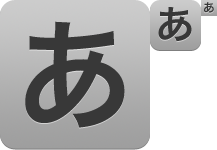
<style>
.page{position:relative;width:217px;height:150px;background:#ffffff}
.page>*{position:absolute;margin:0}
.t1{font:39.2px "HiraKakuProN-W6";color:#383838}
.t2{font:12px "HiraKakuProN-W6";color:#383838}
.t3{font:120px "HiraKakuProN-W6";color:#383838}
</style>
<div class="page">
<p class="t1" style="left:156px;top:5px;width:38px;height:52px">あ</p>
<p class="t2" style="left:204px;top:2px;width:10px;height:11px">あ</p>
<p class="t3" style="left:25px;top:21px;width:100px;height:107px">あ</p>
</div>
